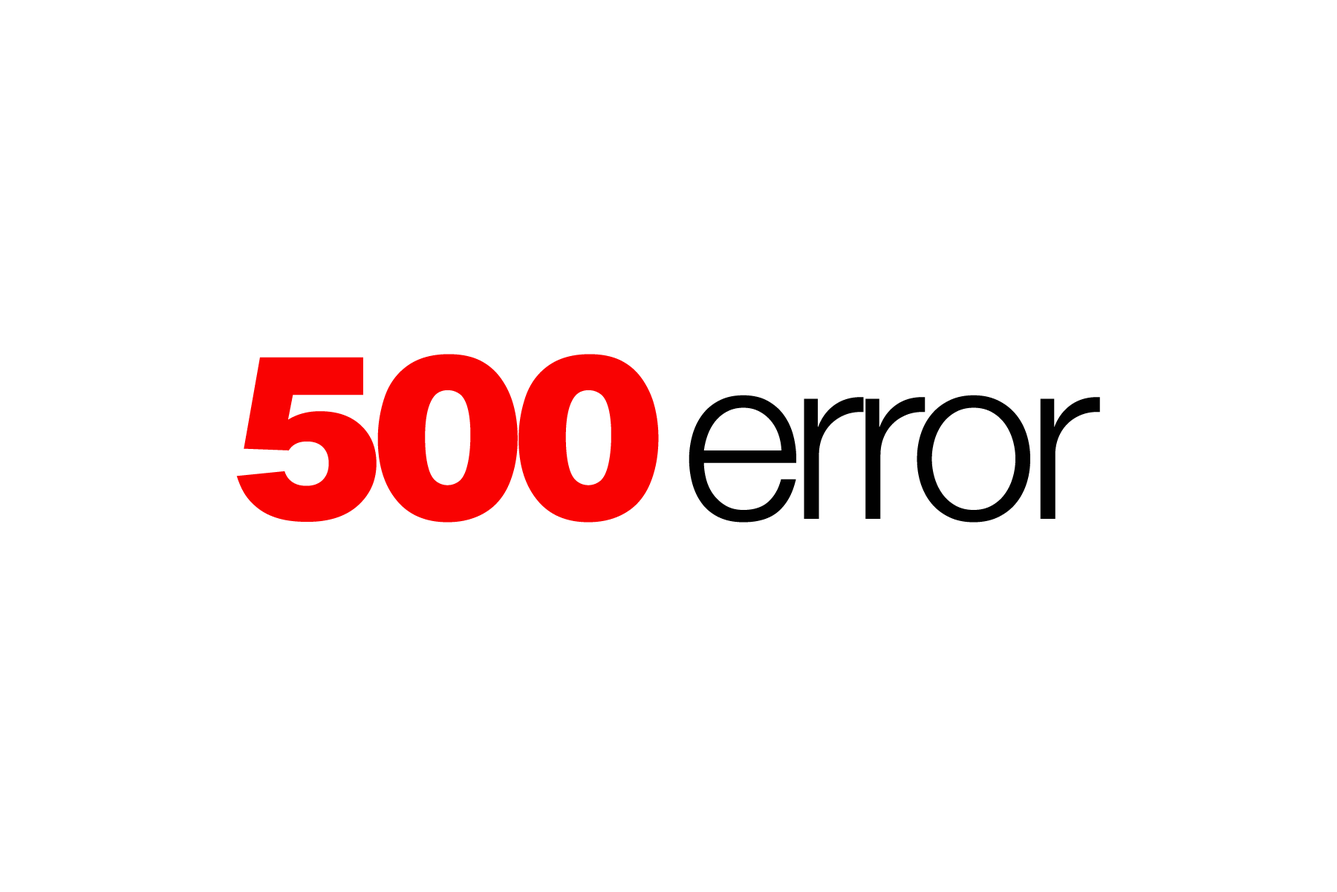
<style>
.page{position:relative;width:1337px;height:892px;background:#ffffff}
.page>*{position:absolute;margin:0}
.t1{font:232.2px "Helvetica-Black";letter-spacing:-0.06em;color:#f90202}
.t2{font:232.2px "HelveticaNeue-Light";letter-spacing:-0.05em;color:#010101}
</style>
<div class="page">
<p class="t1" style="left:236px;top:354px;width:423px;height:168px">500</p>
<p class="t2" style="left:689px;top:395px;width:411px;height:127px">error</p>
</div>
